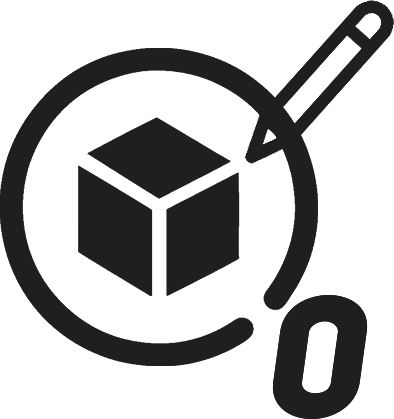
<style>
.page{position:relative;width:394px;height:419px;background:#ffffff}
.page>*{position:absolute;margin:0}
.t1{font:168.9px "UniSansHeavyCapsItalic";color:#1f1f1f}
</style>
<div class="page">
<p class="t1" style="left:272px;top:295px;width:96px;height:125px">0</p>
</div>
